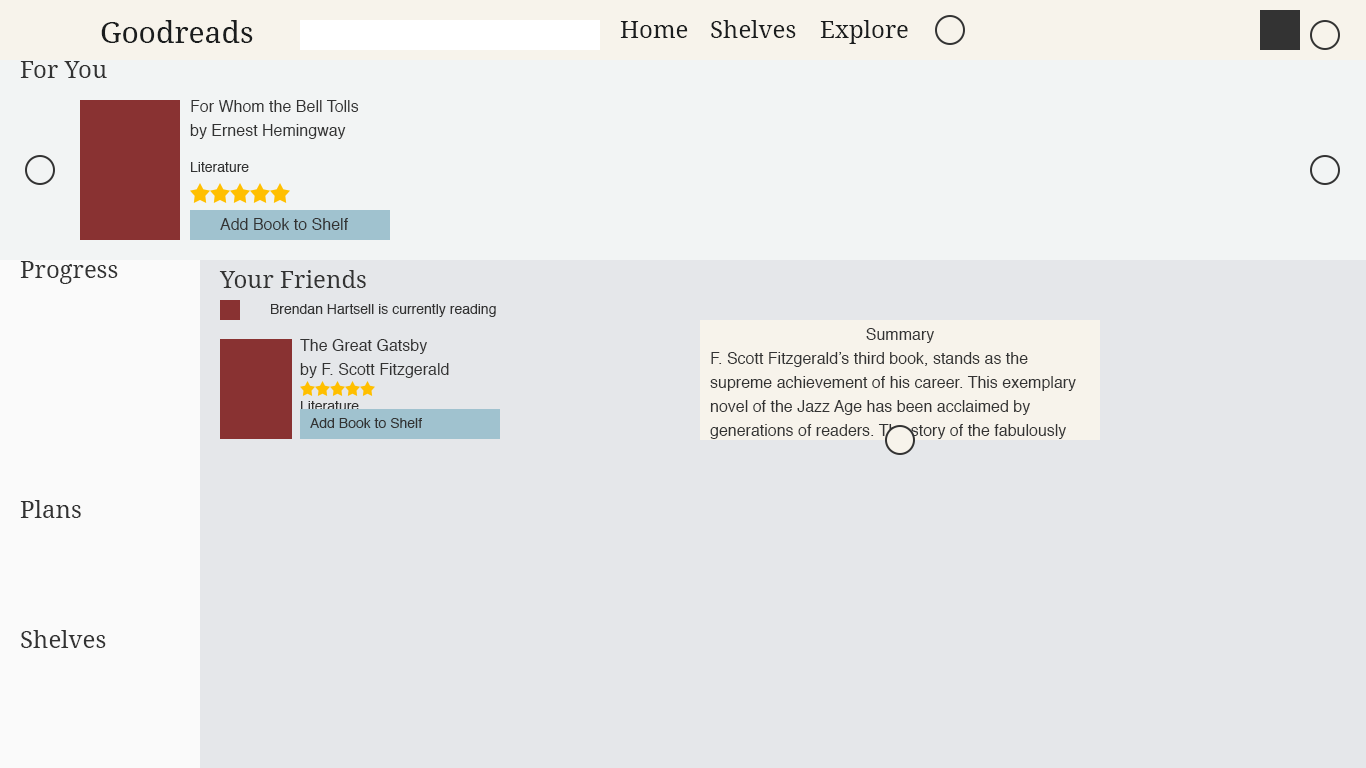
<style>
.page{position:relative;width:1366px;height:768px;background:#e5e7ea}
.page>*{position:absolute;margin:0}
.t1{font:30px "DroidSerif";color:#1b1d1e}
.t2{font:24px "DroidSerif";color:#1b1d1e}
.t3{font:24px "DroidSerif";color:#333333}
.t4{font:16px/24px "Helvetica";color:#333333}
.t5{font:14px "Helvetica";color:#333333}
.t6{font:16px "Helvetica";color:#333333}
.t7{font:18px/24px "Helvetica";color:#333333}
</style>
<div class="page">
<p class="t1" style="left:101px;top:20px;width:152px;height:23px">Goodreads</p>
<p class="t2" style="left:620px;top:21px;width:68px;height:17px">Home</p>
<p class="t2" style="left:711px;top:20px;width:85px;height:18px">Shelves</p>
<p class="t2" style="left:820px;top:20px;width:88px;height:24px">Explore</p>
<p class="t3" style="left:20px;top:61px;width:87px;height:17px">For You</p>
<p class="t4" style="left:190px;top:100px;width:169px;height:72px">For Whom the Bell Tolls<br>by Ernest Hemingway <br><br><span class="t5">Literature</span></p>
<p class="t6" style="left:220px;top:218px;width:128px;height:12px">Add Book to Shelf</p>
<p class="t3" style="left:20px;top:261px;width:98px;height:23px">Progress</p>
<p class="t3" style="left:219px;top:270px;width:147px;height:18px">Your Friends</p>
<p class="t5" style="left:271px;top:304px;width:225px;height:13px">Brendan Hartsell is currently reading</p>
<p class="t4" style="left:710px;top:328px;width:366px;height:111px;text-align:center">Summary<br>F. Scott Fitzgerald’s third book, stands as the supreme achievement of his career. This exemplary novel of the Jazz Age has been acclaimed by generations of readers. The story of the fabulously wealthy Jay <span class="t7">Gatsby and his love for the beautiful Daisy Buchanan, of lavish parties on Long Island at a time when The New York Times noted “gin was the national dr</span></p>
<p class="t4" style="left:300px;top:339px;width:149px;height:72px">The Great Gatsby<br>by F. Scott Fitzgerald<br><br><span class="t5">Literature</span></p>
<p class="t5" style="left:310px;top:418px;width:112px;height:10px">Add Book to Shelf</p>
<p class="t3" style="left:20px;top:500px;width:61px;height:18px">Plans</p>
<p class="t3" style="left:21px;top:630px;width:85px;height:18px">Shelves</p>
</div>
